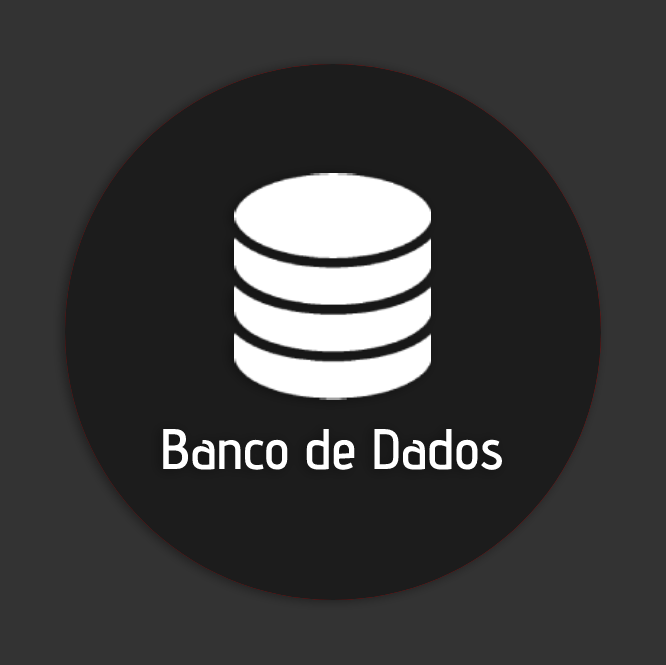
<style>
.page{position:relative;width:666px;height:665px;background:#333333}
.page>*{position:absolute;margin:0}
.t1{font:57px "AdventPro-SemiBold";color:#ffffff}
</style>
<div class="page">
<p class="t1" style="left:163px;top:429px;width:339px;height:41px">Banco de Dados</p>
</div>
